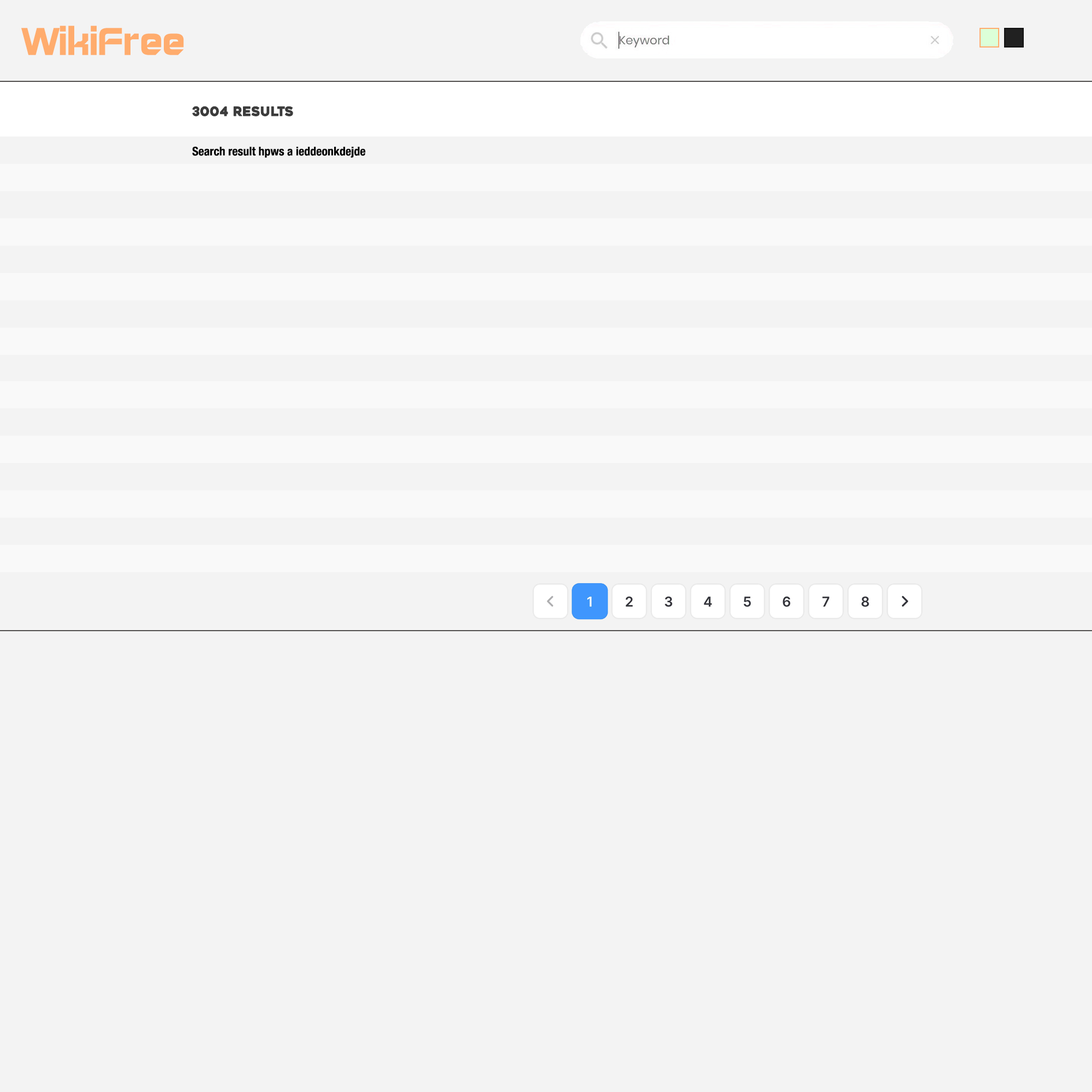
<style>
.page{position:relative;width:1092px;height:1092px;background:#f3f3f3}
.page>*{position:absolute;margin:0}
.t1{font:44.8px "GayatriRegular";color:#ffac6d}
.t2{font:13.1px "Heavitas";color:#3c3c3c}
.t3{font:12px "HelveticaNeueLTStd-BdCn";color:#000000}
</style>
<div class="page">
<p class="t1" style="left:21px;top:26px;width:163px;height:29px">WikiFree</p>
<p class="t2" style="left:192px;top:106px;width:101px;height:10px">3004 Results</p>
<p class="t3" style="left:192px;top:146px;width:174px;height:12px">Search result hpws a ieddeonkdejde</p>
</div>
